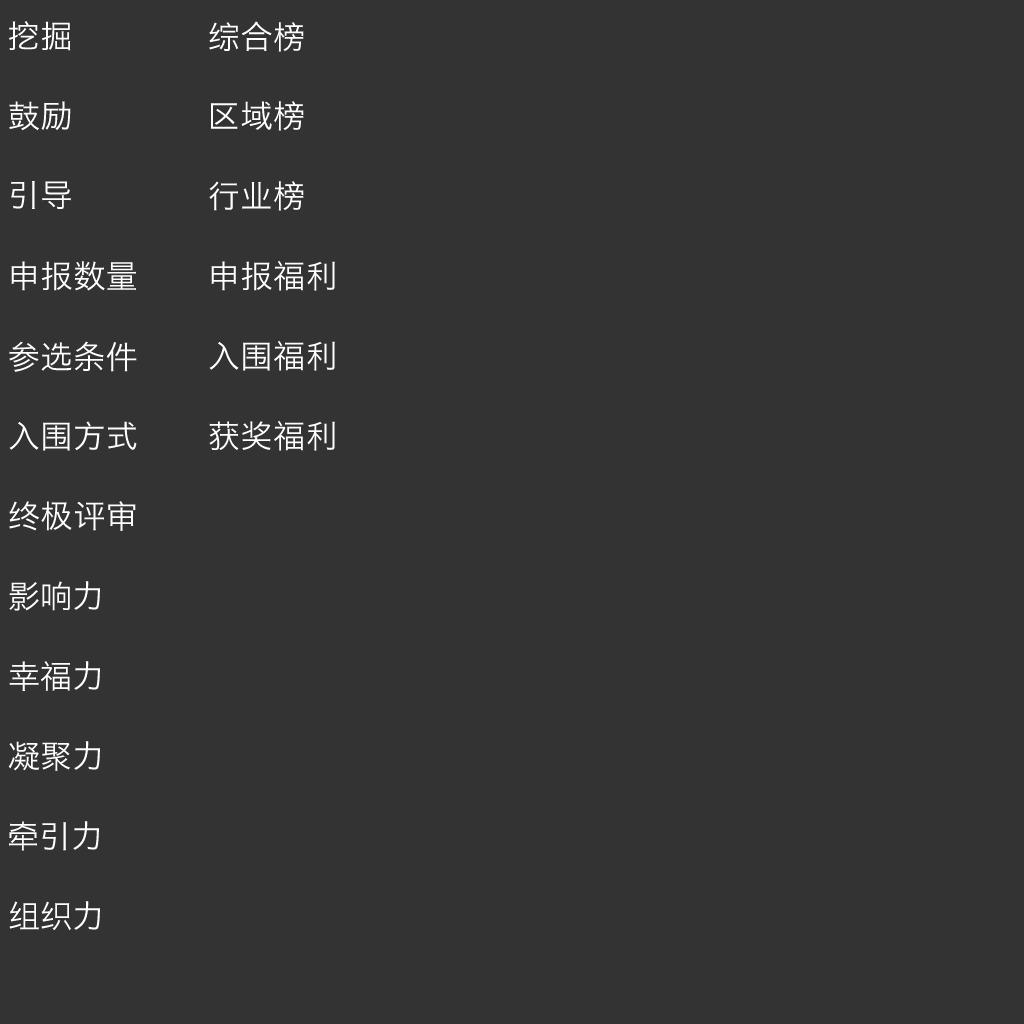
<style>
.page{position:relative;width:1024px;height:1024px;background:#333333}
.page>*{position:absolute;margin:0}
.t1{font:32px "HiraginoSansGB-W3";letter-spacing:0.02em;color:#ffffff}
.t2{font:32px "HiraginoSansGB-W3";color:#ffffff}
</style>
<div class="page">
<p class="t1" style="left:9px;top:21px;width:62px;height:30px">挖掘</p>
<p class="t1" style="left:209px;top:21px;width:95px;height:31px">综合榜</p>
<p class="t1" style="left:9px;top:101px;width:62px;height:30px">鼓励</p>
<p class="t1" style="left:210px;top:101px;width:94px;height:30px">区域榜</p>
<p class="t1" style="left:11px;top:181px;width:60px;height:28px">引导</p>
<p class="t1" style="left:209px;top:181px;width:95px;height:30px">行业榜</p>
<p class="t1" style="left:11px;top:261px;width:125px;height:30px">申报数量</p>
<p class="t1" style="left:211px;top:260px;width:124px;height:31px">申报福利</p>
<p class="t1" style="left:9px;top:341px;width:128px;height:31px">参选条件</p>
<p class="t1" style="left:209px;top:340px;width:126px;height:31px">入围福利</p>
<p class="t1" style="left:9px;top:421px;width:128px;height:30px">入围方式</p>
<p class="t1" style="left:209px;top:420px;width:126px;height:31px">获奖福利</p>
<p class="t1" style="left:9px;top:501px;width:127px;height:30px">终极评审</p>
<p class="t2" style="left:9px;top:581px;width:91px;height:30px">影响力</p>
<p class="t2" style="left:9px;top:661px;width:91px;height:30px">幸福力</p>
<p class="t2" style="left:8px;top:741px;width:92px;height:30px">凝聚力</p>
<p class="t2" style="left:9px;top:821px;width:90px;height:30px">牵引力</p>
<p class="t2" style="left:9px;top:901px;width:91px;height:30px">组织力</p>
</div>
